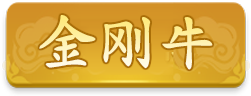
<style>
.page{position:relative;width:251px;height:96px}
.page>*{position:absolute;margin:0}
.t1{font:60px "AaBoruokaishuBldjf";letter-spacing:0.02em}
</style>
<div class="page">
<p class="t1" style="left:39px;top:15px;width:174px;height:55px">金刚牛</p>
</div>
